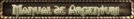
<style>
.page{position:relative;width:134px;height:19px}
.page>*{position:absolute;margin:0}
.t1{font:12px "Morpheus"}
</style>
<div class="page">
<p class="t1" style="left:12px;top:5px;width:107px;height:12px">Manual de Argentum</p>
</div>
